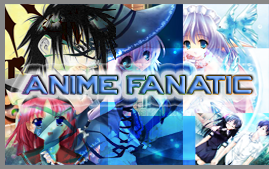
<style>
.page{position:relative;width:269px;height:169px}
.page>*{position:absolute;margin:0}
.t1{font:30px "CRYSTALCORE"}
</style>
<div class="page">
<p class="t1" style="left:22px;top:76px;width:230px;height:18px">Anime Fanatic</p>
</div>
